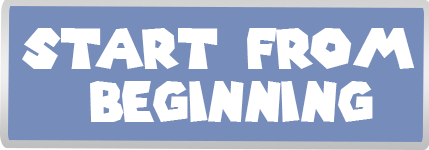
<style>
.page{position:relative;width:429px;height:150px;background:#768cbb}
.page>*{position:absolute;margin:0}
.t1{font:54.8px/53.1px "SuperMarioGalaxy";color:#ffffff}
</style>
<div class="page">
<p class="t1" style="left:22px;top:28px;width:393px;height:94px;text-align:center">start from <br>beginning</p>
</div>
